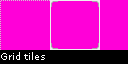
<style>
.page{position:relative;width:128px;height:64px;background:#ff00d8}
.page>*{position:absolute;margin:0}
.t1{font:9px "Verdana";color:#ffffff}
</style>
<div class="page">
<p class="t1" style="left:1px;top:52px;width:44px;height:8px">Grid tiles</p>
</div>
